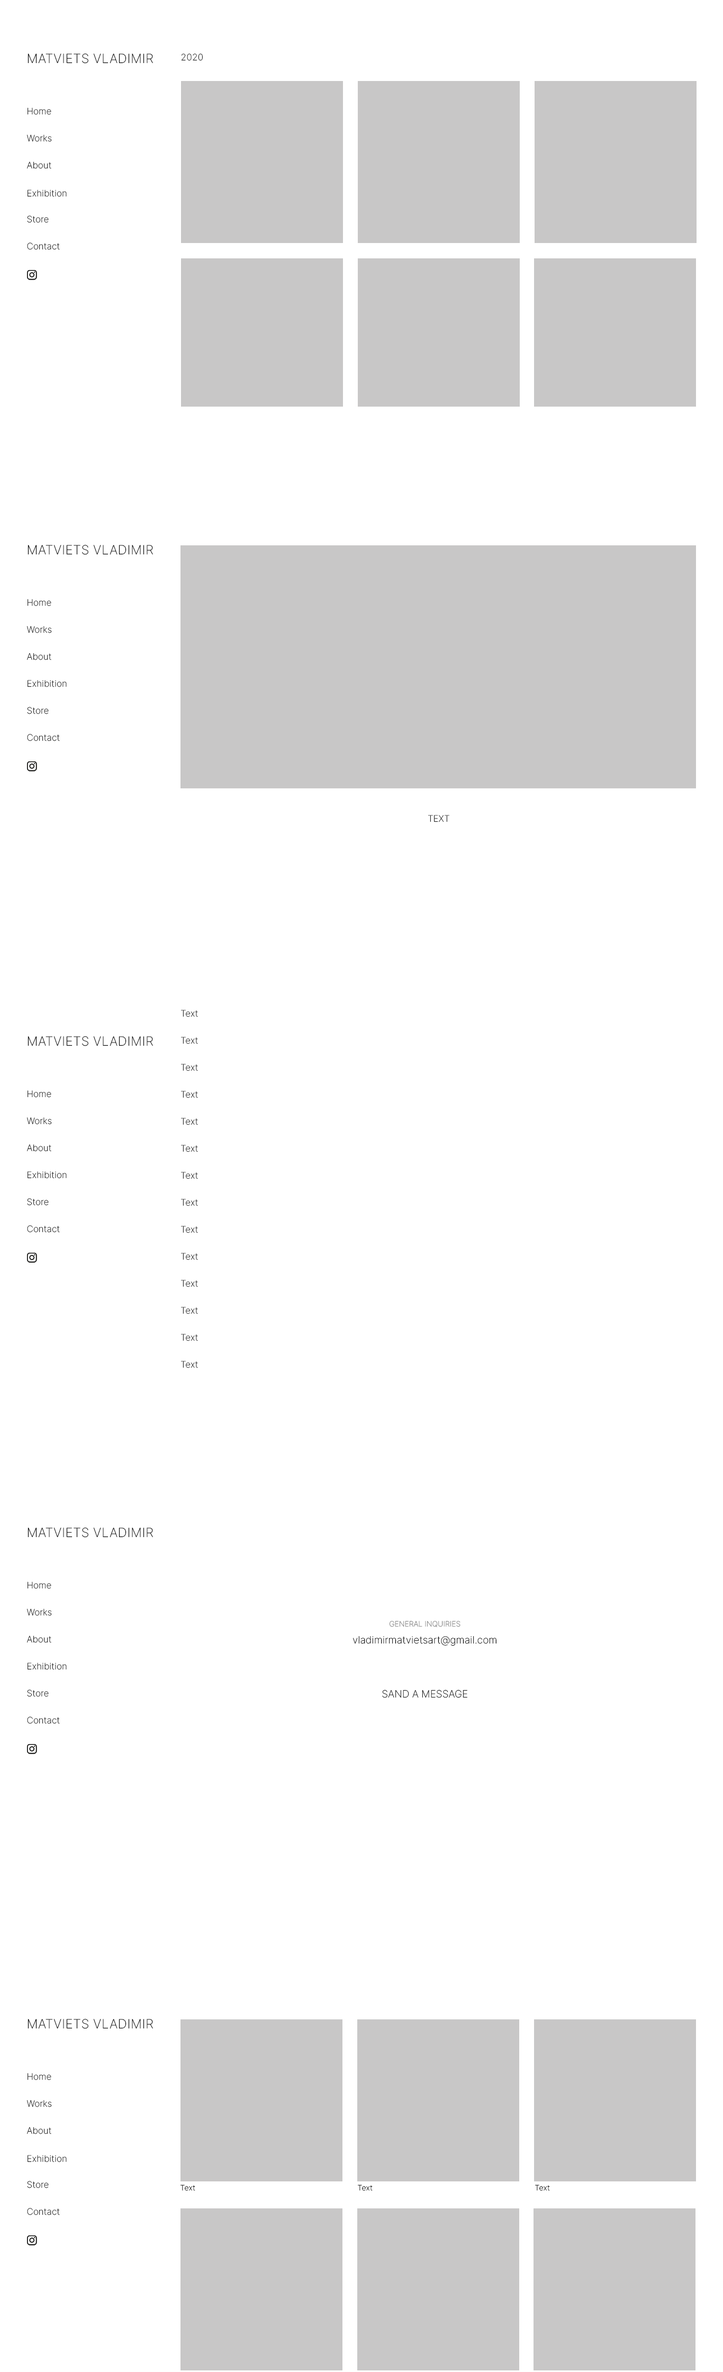
<style>
.page{position:relative;width:723px;height:2372px;background:#ffffff}
.page>*{position:absolute;margin:0}
.t1{font:12.7px "Inter-ExtraLightBETA";letter-spacing:0.02em;color:#000000}
.t2{font:9px "Inter-ExtraLightBETA";letter-spacing:0.02em}
.t3{font:9px "Inter-ExtraLightBETA"}
.t4{font:7.4px "Inter-ExtraLightBETA";color:#848484}
.t5{font:10.1px "Inter-ExtraLightBETA";color:#848484}
.t6{font:10.1px "Inter-ExtraLightBETA";color:#000000}
.t7{font:7.4px "Inter-ExtraLightBETA";letter-spacing:0.02em;color:#000000}
</style>
<div class="page">
<p class="t1" style="left:28px;top:53px;width:125px;height:11px">MATVIETS VLADIMIR</p>
<p class="t2" style="left:181px;top:53px;width:22px;height:8px">2020</p>
<p class="t3" style="left:28px;top:107px;width:23px;height:8px">Home</p>
<p class="t3" style="left:27px;top:134px;width:25px;height:8px">Works</p>
<p class="t3" style="left:27px;top:161px;width:24px;height:8px">About</p>
<p class="t3" style="left:28px;top:190px;width:39px;height:7px">Exhibition</p>
<p class="t3" style="left:27px;top:215px;width:22px;height:8px">Store</p>
<p class="t3" style="left:27px;top:242px;width:33px;height:8px">Contact</p>
<p class="t1" style="left:28px;top:545px;width:125px;height:10px">MATVIETS VLADIMIR</p>
<p class="t3" style="left:28px;top:599px;width:23px;height:7px">Home</p>
<p class="t3" style="left:27px;top:626px;width:25px;height:7px">Works</p>
<p class="t3" style="left:27px;top:653px;width:24px;height:7px">About</p>
<p class="t3" style="left:28px;top:680px;width:39px;height:7px">Exhibition</p>
<p class="t3" style="left:27px;top:707px;width:22px;height:7px">Store</p>
<p class="t3" style="left:27px;top:734px;width:33px;height:7px">Contact</p>
<p class="t3" style="left:428px;top:815px;width:21px;height:7px">TEXT</p>
<p class="t3" style="left:181px;top:1010px;width:17px;height:7px">Text</p>
<p class="t1" style="left:28px;top:1036px;width:125px;height:10px">MATVIETS VLADIMIR</p>
<p class="t3" style="left:181px;top:1037px;width:17px;height:7px">Text</p>
<p class="t3" style="left:181px;top:1064px;width:17px;height:7px">Text</p>
<p class="t3" style="left:28px;top:1090px;width:23px;height:7px">Home</p>
<p class="t3" style="left:181px;top:1091px;width:17px;height:7px">Text</p>
<p class="t3" style="left:27px;top:1117px;width:25px;height:7px">Works</p>
<p class="t3" style="left:181px;top:1118px;width:17px;height:7px">Text</p>
<p class="t3" style="left:27px;top:1144px;width:24px;height:7px">About</p>
<p class="t3" style="left:181px;top:1145px;width:17px;height:7px">Text</p>
<p class="t3" style="left:28px;top:1171px;width:39px;height:7px">Exhibition</p>
<p class="t3" style="left:181px;top:1172px;width:17px;height:7px">Text</p>
<p class="t3" style="left:27px;top:1198px;width:22px;height:7px">Store</p>
<p class="t3" style="left:181px;top:1199px;width:17px;height:7px">Text</p>
<p class="t3" style="left:27px;top:1225px;width:33px;height:7px">Contact</p>
<p class="t3" style="left:181px;top:1226px;width:17px;height:7px">Text</p>
<p class="t3" style="left:181px;top:1253px;width:17px;height:7px">Text</p>
<p class="t3" style="left:181px;top:1280px;width:17px;height:7px">Text</p>
<p class="t3" style="left:181px;top:1307px;width:17px;height:7px">Text</p>
<p class="t3" style="left:181px;top:1334px;width:17px;height:7px">Text</p>
<p class="t3" style="left:181px;top:1361px;width:17px;height:7px">Text</p>
<p class="t1" style="left:28px;top:1527px;width:125px;height:10px">MATVIETS VLADIMIR</p>
<p class="t3" style="left:28px;top:1581px;width:23px;height:8px">Home</p>
<p class="t3" style="left:27px;top:1608px;width:25px;height:8px">Works</p>
<p class="t4" style="left:390px;top:1621px;width:71px;height:6px"><span class="t5"><br></span>GENERAL INQUIRIES</p>
<p class="t3" style="left:27px;top:1635px;width:24px;height:8px">About</p>
<p class="t6" style="left:353px;top:1636px;width:144px;height:10px">vladimirmatvietsart@gmail.com</p>
<p class="t3" style="left:28px;top:1662px;width:39px;height:8px">Exhibition</p>
<p class="t3" style="left:27px;top:1689px;width:22px;height:8px">Store</p>
<p class="t6" style="left:382px;top:1689px;width:85px;height:9px">SAND A MESSAGE</p>
<p class="t3" style="left:27px;top:1716px;width:33px;height:8px">Contact</p>
<p class="t1" style="left:28px;top:2019px;width:125px;height:10px">MATVIETS VLADIMIR</p>
<p class="t3" style="left:28px;top:2073px;width:23px;height:7px">Home</p>
<p class="t3" style="left:27px;top:2100px;width:25px;height:7px">Works</p>
<p class="t3" style="left:27px;top:2127px;width:24px;height:7px">About</p>
<p class="t3" style="left:28px;top:2155px;width:39px;height:7px">Exhibition</p>
<p class="t3" style="left:27px;top:2181px;width:22px;height:7px">Store</p>
<p class="t7" style="left:181px;top:2184px;width:14px;height:7px">Text</p>
<p class="t7" style="left:358px;top:2184px;width:15px;height:7px">Text</p>
<p class="t7" style="left:535px;top:2184px;width:15px;height:7px">Text</p>
<p class="t3" style="left:27px;top:2208px;width:33px;height:7px">Contact</p>
</div>
